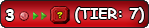
<style>
.page{position:relative;width:149px;height:28px}
.page>*{position:absolute;margin:0}
.t1{font:12px "ComicSansMS-Bold";color:#ffffff}
.t2{font:14.7px "ComicSansMS-Bold";color:#ffffff}
</style>
<div class="page">
<p class="t1" style="left:5px;top:9px;width:9px;height:12px">3</p>
<p class="t2" style="left:75px;top:7px;width:69px;height:16px">(TIER: 7)</p>
</div>
